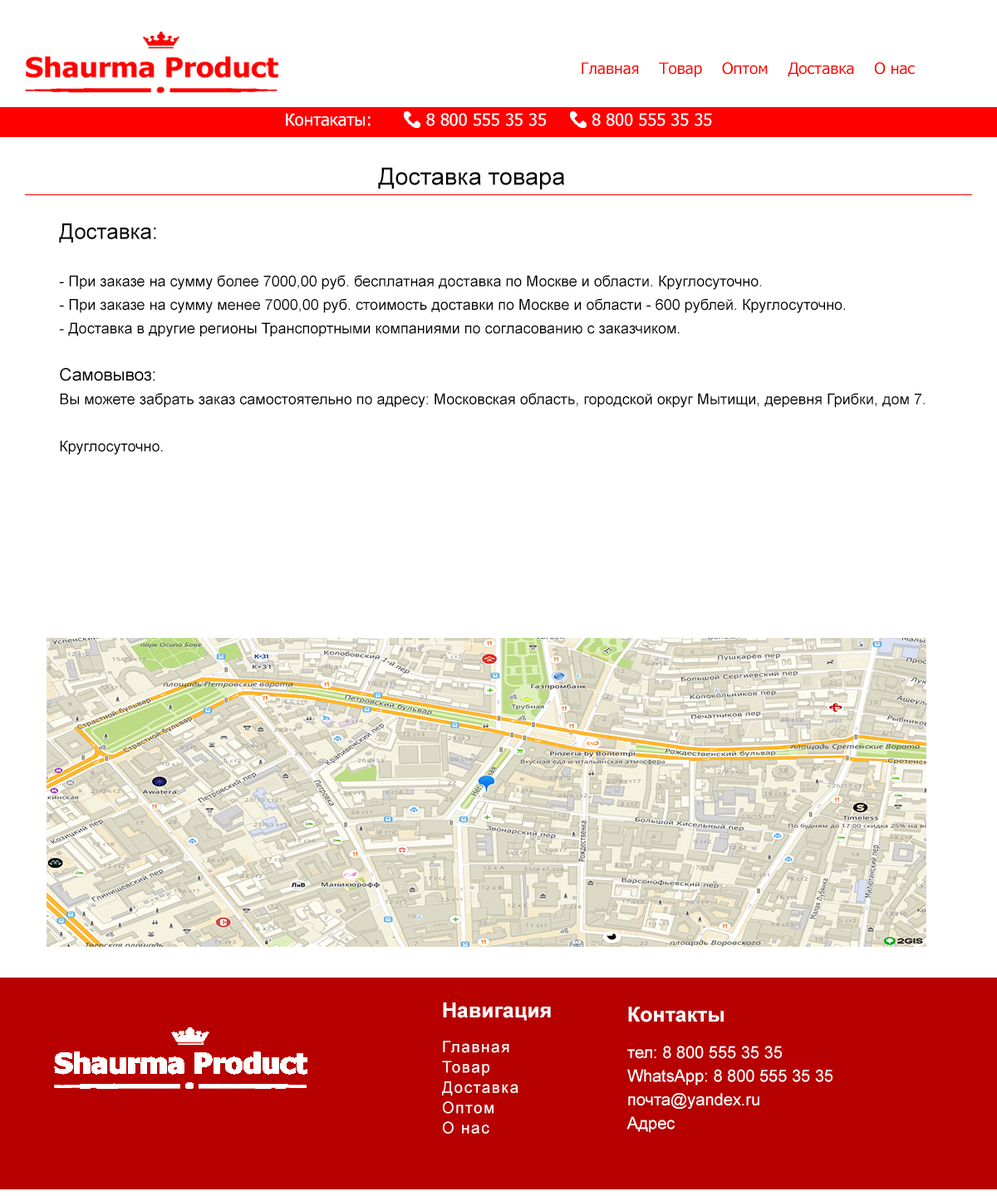
<style>
.page{position:relative;width:997px;height:1196px;background:#ffffff}
.page>*{position:absolute;margin:0}
.t1{font:15.8px "Tahoma";color:#fe0000}
.t2{font:16.6px "Tahoma";color:#ffffff}
.t3{font:24.1px "ArialMT";color:#000000}
.t4{font:15px/23.6px "ArialMT";color:#000000}
.t5{font:21.6px/23.6px "ArialMT";color:#000000}
.t6{font:17.4px/23.6px "ArialMT";color:#000000}
.t7{font:15.8px/20.3px "ArialMT";letter-spacing:0.08em;color:#ffffff}
.t8{font:20.8px/17.4px "Arial-BoldMT";color:#ffffff}
.t9{font:15.8px/17.4px "ArialMT";letter-spacing:0.08em;color:#ffffff}
.t10{font:16.6px/23.6px "ArialMT";color:#ffffff}
.t11{font:20.8px/18.3px "Arial-BoldMT";color:#ffffff}
.t12{font:16.6px/18.3px "ArialMT";color:#ffffff}
</style>
<div class="page">
<p class="t1" style="left:581px;top:62px;width:334px;height:15px">Главная    Товар    Оптом    Доставка    О нас</p>
<p class="t2" style="left:286px;top:113px;width:426px;height:13px">Контакаты:           8 800 555 35 35         8 800 555 35 35</p>
<p class="t3" style="left:378px;top:167px;width:187px;height:23px">Доставка товара</p>
<p class="t4" style="left:59px;top:223px;width:866px;height:232px"><span class="t5">Доставка:<br></span><br>- При заказе на сумму более 7000,00 руб. бесплатная доставка по Москве и области. Круглосуточно.<br>- При заказе на сумму менее 7000,00 руб. стоимость доставки по Москве и области - 600 рублей. Круглосуточно.<br>- Доставка в другие регионы Транспортными компаниями по согласованию с заказчиком.<br><br><span class="t6">Самовывоз: <br></span>Вы можете забрать заказ самостоятельно по адресу: Московская область, городской округ Мытищи, деревня Грибки, дом 7.<br><br>Круглосуточно.</p>
<p class="t7" style="left:442px;top:1003px;width:109px;height:131px"><span class="t8">Навигация<br><br></span><span class="t9">Главная<br></span>Товар <br>Доставка<br>Оптом<br>О нас</p>
<p class="t10" style="left:626px;top:1007px;width:206px;height:126px"><span class="t11">Контакты<br><br></span><span class="t12">тел: 8 800 555 35 35<br></span>WhatsApp: 8 800 555 35 35<br>почта@yandex.ru<br>Адрес</p>
</div>
